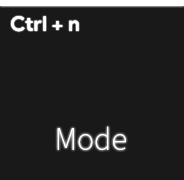
<style>
.page{position:relative;width:184px;height:180px;background:#191919}
.page>*{position:absolute;margin:0}
.t1{font:20.8px "ProductSans-Bold";color:#ffffff}
.t2{font:29.2px "NotoSansCJKkr-Thin";color:#ffffff}
</style>
<div class="page">
<p class="t1" style="left:11px;top:16px;width:68px;height:16px">Ctrl + n</p>
<p class="t2" style="left:57px;top:126px;width:69px;height:24px">Mode</p>
</div>
